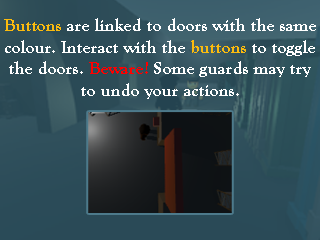
<style>
.page{position:relative;width:320px;height:240px}
.page>*{position:absolute;margin:0}
.t1{font:18px "GoudyOldStyleT-Bold";color:#ffffff}
.t2{font:18px "GoudyOldStyleT-Bold";color:#fbbb0e}
.t3{font:18px "GoudyOldStyleT-Bold";color:#ff0000}
</style>
<div class="page">
<p class="t1" style="left:4px;top:18px;width:312px;height:81px;text-align:center"><span class="t2">Buttons</span> are linked to doors with the same<br>colour. Interact with the <span class="t2">buttons</span> to toggle<br>the doors. <span class="t3">Beware!</span> Some guards may try<br>to undo your actions.</p>
</div>
